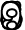
<style>
.page{position:relative;width:25px;height:30px;background:#ffffff}
.page>*{position:absolute;margin:0}
.t1{font:30px "BubbleSoftRegularSWFTE"}
.t2{font:30px "BubbleSoftRegularSWFTE";color:#ffffff}
</style>
<div class="page">
<p class="t1" style="left:2px;top:3px;width:17px;height:26px">0</p>
<p class="t2" style="left:2px;top:3px;width:18px;height:25px">9</p>
<p class="t1" style="left:3px;top:2px;width:17px;height:26px">6</p>
<p class="t1" style="left:3px;top:3px;width:17px;height:25px">8</p>
<p class="t2" style="left:8px;top:10px;width:8px;height:19px">:</p>
</div>
